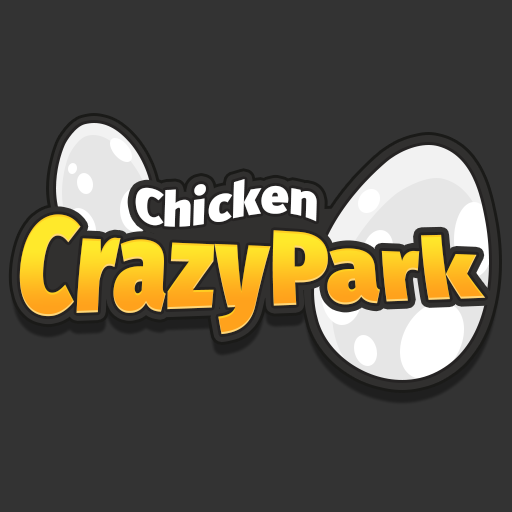
<style>
.page{position:relative;width:512px;height:512px;background:#333333}
.page>*{position:absolute;margin:0}
.t1{font:48.6px "FiraSans-Ultra";letter-spacing:0.025em;color:#ffffff}
.t2{font:77.8px "FiraSans-Ultra";letter-spacing:0.01em;scale:1.25 1}
</style>
<div class="page">
<p class="t1" style="left:135px;top:179px;width:182px;height:48px;rotate:2deg">Сhicken</p>
<p class="t2" style="left:19px;top:214px;width:467px;height:121px">CrazyPark</p>
</div>
